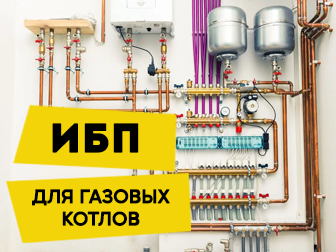
<style>
.page{position:relative;width:336px;height:252px}
.page>*{position:absolute;margin:0}
.t1{font:40px "Intro";color:#000000;text-transform:uppercase;font-weight:bold}
.t2{font:18.7px "MusticaPro-SemiBold";color:#000000;text-transform:uppercase;font-weight:bold}
</style>
<div class="page">
<p class="t1" style="left:52px;top:123px;width:87px;height:30px">ИБП</p>
<p class="t2" style="left:32px;top:189px;width:138px;height:37px;text-align:center">для газовых<br>котлов</p>
</div>
